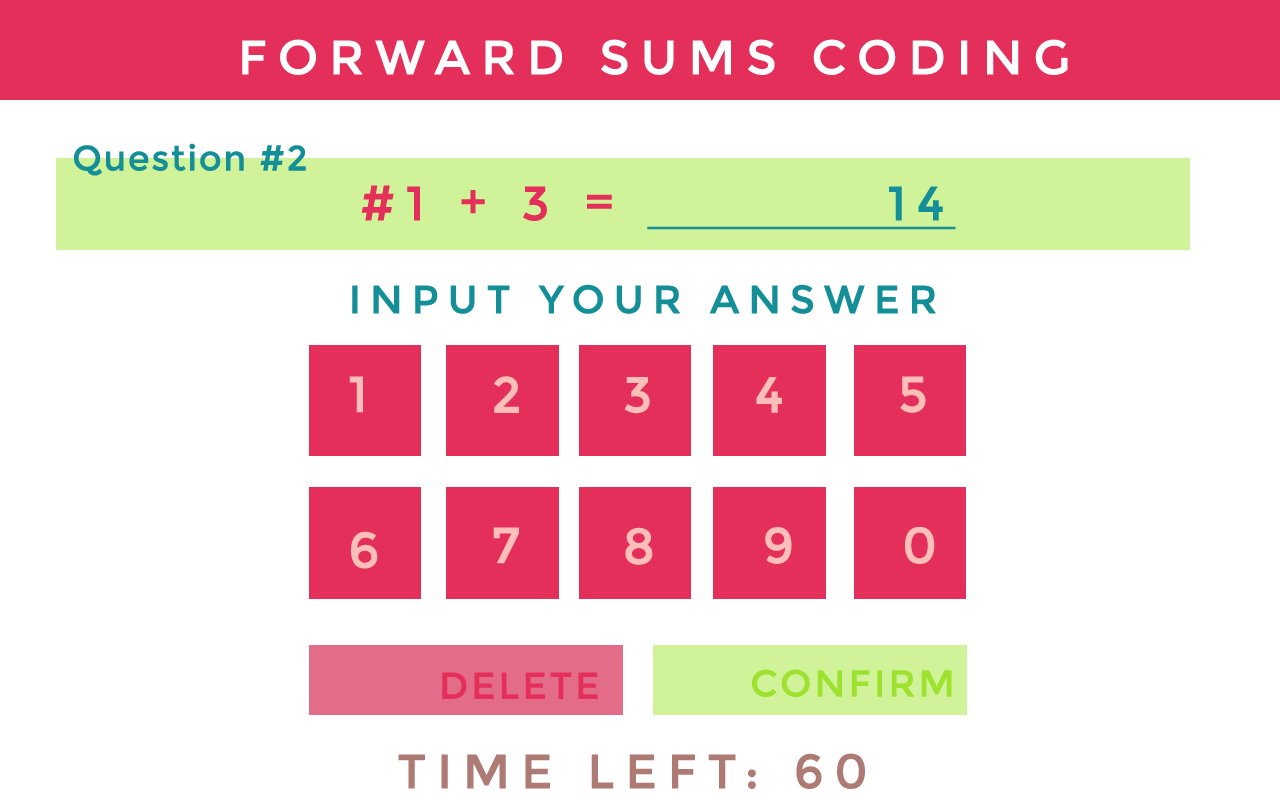
<style>
.page{position:relative;width:1280px;height:800px;background:#ffffff}
.page>*{position:absolute;margin:0}
.t1{font:48px "Montserrat-Regular";letter-spacing:0.2em;color:#ffffff;text-transform:uppercase;font-weight:bold}
.t2{font:35px "Montserrat-Regular";letter-spacing:0.025em;color:#148f97;font-weight:bold}
.t3{font:48px "Montserrat-Regular";letter-spacing:0.2em;color:#e42f5a;font-weight:bold}
.t4{font:48px "Montserrat-Regular";letter-spacing:0.2em;color:#148f97;font-weight:bold;text-decoration:underline}
.t5{font:39.3px "Montserrat-Regular";letter-spacing:0.2em;color:#148f97;text-transform:uppercase;font-weight:bold}
.t6{font:50.3px "Montserrat-Regular";letter-spacing:0.2em;color:#ffbfb8;text-transform:uppercase;font-weight:bold}
.t7{font:37.3px "Montserrat-Regular";letter-spacing:0.05em;color:#e42f5a;text-transform:uppercase;font-weight:bold}
.t8{font:37.3px "Montserrat-Regular";letter-spacing:0.05em;color:#9de22f;text-transform:uppercase;font-weight:bold}
.t9{font:48px "Montserrat-Regular";letter-spacing:0.2em;color:#ad7a74;text-transform:uppercase;font-weight:bold}
</style>
<div class="page">
<p class="t1" style="left:242px;top:39px;width:826px;height:36px">Forward Sums Coding</p>
<p class="t2" style="left:74px;top:143px;width:232px;height:33px">Question #2</p>
<p class="t3" style="left:361px;top:185px;width:251px;height:36px">#1 + 3 =</p>
<p class="t4" style="left:647px;top:186px;width:309px;height:44px">14</p>
<p class="t5" style="left:352px;top:284px;width:584px;height:30px">Input your Answer</p>
<p class="t6" style="left:349px;top:376px;width:14px;height:37px">1</p>
<p class="t6" style="left:494px;top:376px;width:25px;height:37px">2</p>
<p class="t6" style="left:624px;top:377px;width:26px;height:37px">3</p>
<p class="t6" style="left:756px;top:377px;width:26px;height:36px">4</p>
<p class="t6" style="left:900px;top:376px;width:26px;height:37px">5</p>
<p class="t6" style="left:351px;top:531px;width:27px;height:38px">6</p>
<p class="t6" style="left:493px;top:527px;width:26px;height:37px">7</p>
<p class="t6" style="left:625px;top:527px;width:28px;height:38px">8</p>
<p class="t6" style="left:765px;top:527px;width:27px;height:37px">9</p>
<p class="t6" style="left:905px;top:527px;width:30px;height:37px">0</p>
<p class="t7" style="left:442px;top:672px;width:156px;height:27px">Delete</p>
<p class="t8" style="left:752px;top:669px;width:200px;height:28px">Confirm</p>
<p class="t9" style="left:398px;top:753px;width:467px;height:36px">Time Left: 60</p>
</div>
